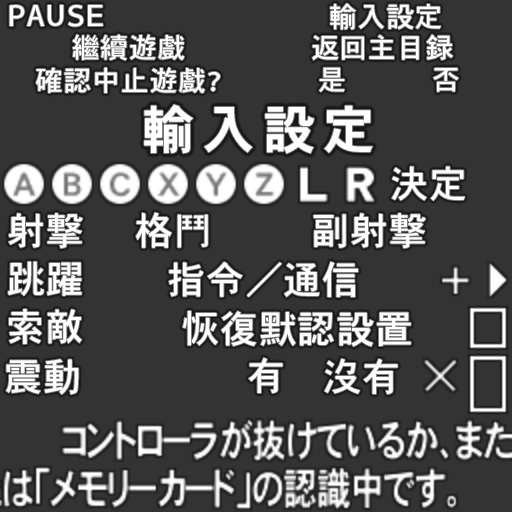
<style>
.page{position:relative;width:512px;height:512px;background:#333333}
.page>*{position:absolute;margin:0}
.t1{font:30.8px "HeiseiKakuGoStd-W5";letter-spacing:0.02em;color:#ffffff;scale:0.91 1}
.t2{font:28px "HeiseiKakuGoStd-W5";letter-spacing:0.02em;color:#ffffff}
.t3{font:52px "HeiseiKakuGoStd-W7";letter-spacing:0.16em;color:#ffffff}
.t4{font:38px "HeiseiKakuGoStd-W5";letter-spacing:0.02em;color:#ffffff}
</style>
<div class="page">
<p class="t1" style="left:9px;top:5px;width:94px;height:22px">PAUSE</p>
<p class="t2" style="left:330px;top:3px;width:111px;height:27px">輸入設定</p>
<p class="t2" style="left:72px;top:34px;width:113px;height:27px">繼續遊戲</p>
<p class="t2" style="left:312px;top:34px;width:141px;height:27px">返回主目録</p>
<p class="t2" style="left:36px;top:67px;width:184px;height:26px">確認中止遊戲?</p>
<p class="t2" style="left:319px;top:67px;width:26px;height:25px">是</p>
<p class="t2" style="left:433px;top:68px;width:26px;height:24px">否</p>
<p class="t3" style="left:144px;top:104px;width:229px;height:50px">輸入設定</p>
<p class="t4" style="left:391px;top:166px;width:74px;height:35px">決定</p>
<p class="t4" style="left:8px;top:213px;width:75px;height:36px">射撃</p>
<p class="t4" style="left:136px;top:212px;width:72px;height:36px">格鬥</p>
<p class="t4" style="left:313px;top:213px;width:113px;height:36px">副射撃</p>
<p class="t4" style="left:8px;top:261px;width:74px;height:35px">跳躍</p>
<p class="t4" style="left:169px;top:261px;width:189px;height:36px">指令/通信</p>
<p class="t4" style="left:9px;top:309px;width:73px;height:35px">索敵</p>
<p class="t4" style="left:182px;top:311px;width:229px;height:36px">恢復默認設置</p>
<p class="t4" style="left:6px;top:359px;width:73px;height:36px">震動</p>
<p class="t4" style="left:248px;top:357px;width:35px;height:37px">有</p>
<p class="t4" style="left:324px;top:358px;width:74px;height:37px">沒有</p>
</div>
